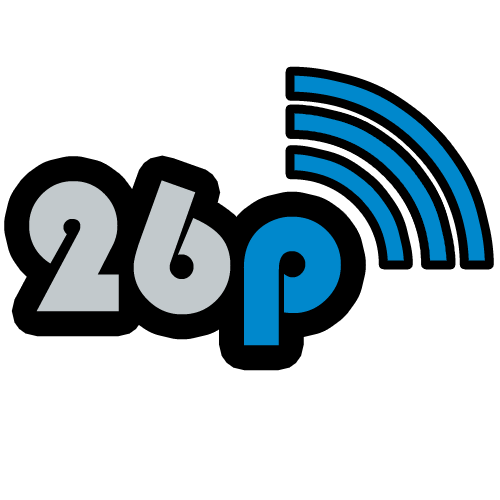
<style>
.page{position:relative;width:500px;height:500px;background:#ffffff}
.page>*{position:absolute;margin:0}
.t1{font:189.9px "Bauhaus93";color:#c2c9cc}
.t2{font:189.9px "Bauhaus93";color:#0088cc}
</style>
<div class="page">
<p class="t1" style="left:29px;top:180px;width:312px;height:166px">26<span class="t2">p</span></p>
</div>
